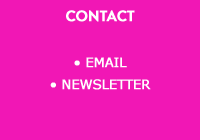
<style>
.page{position:relative;width:200px;height:140px;background:#f117b5}
.page>*{position:absolute;margin:0}
.t1{font:15px "BrandonGrotesque-Bold";letter-spacing:-0.02em;color:#ffffff;font-weight:bold}
.t2{font:13px/22px "Verdana";letter-spacing:-0.02em;color:#ffffff;font-weight:bold}
</style>
<div class="page">
<p class="t1" style="left:66px;top:10px;width:69px;height:12px">CONTACT</p>
<p class="t2" style="left:50px;top:57px;width:101px;height:33px;text-align:center">• EMAIL<br>• NEWSLETTER</p>
</div>
